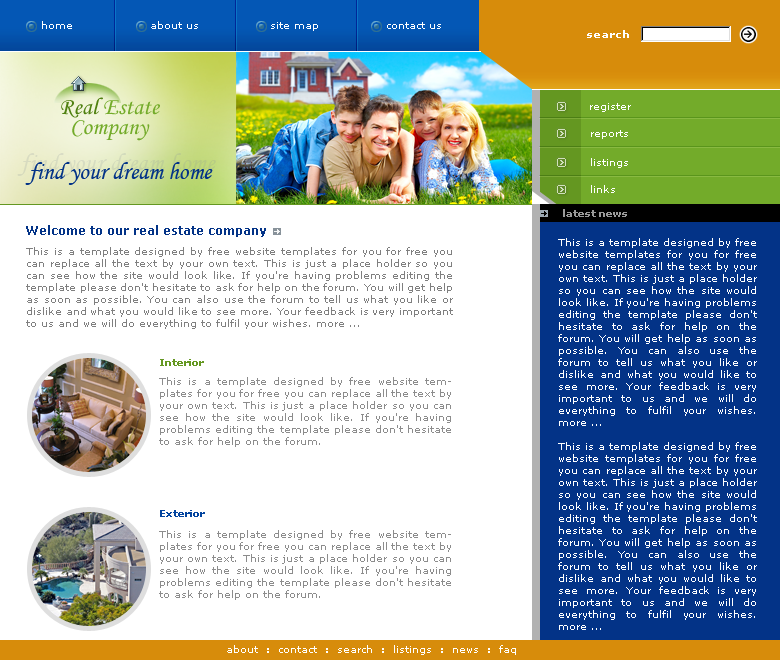
<style>
.page{position:relative;width:780px;height:660px;background:#ffffff}
.page>*{position:absolute;margin:0}
.t1{font:10px "Verdana";color:#ffffff}
.t2{font:10px "Verdana-Bold";letter-spacing:0.1em;color:#ffffff}
.t3{font:24px/20px "MonotypeCorsiva";color:#73ab2a}
.t4{font:24px/20px "MonotypeCorsiva";color:#508111}
.t5{font:10px "Verdana";letter-spacing:0.001em;color:#ffffff}
.t6{font:24px "MonotypeCorsiva";color:#033387}
.t7{font:10px "Verdana-Bold";letter-spacing:0.001em;color:#9a9a9a}
.t8{font:12px "Verdana-Bold";color:#033387}
.t9{font:10px/12px "Verdana";color:#ffffff}
.t10{font:10px/12px "Verdana";color:#7f7f7f}
.t11{font:10px "Verdana-Bold";color:#649721}
.t12{font:10px/12px "Verdana";color:#8c8c8c}
.t13{font:10px "Verdana-Bold";color:#03449f}
.t14{font:10px "Verdana-Bold";color:#ffffff}
</style>
<div class="page">
<p class="t1" style="left:42px;top:21px;width:30px;height:8px">home</p>
<p class="t1" style="left:151px;top:21px;width:47px;height:8px">about us</p>
<p class="t1" style="left:271px;top:22px;width:47px;height:9px">site map</p>
<p class="t1" style="left:387px;top:22px;width:54px;height:7px">contact us</p>
<p class="t2" style="left:587px;top:30px;width:42px;height:8px">search</p>
<p class="t3" style="left:61px;top:97px;width:99px;height:44px;text-align:center"><span class="t4">Real</span> Estate<br>Company</p>
<p class="t1" style="left:590px;top:103px;width:41px;height:9px">register</p>
<p class="t5" style="left:591px;top:130px;width:37px;height:9px">reports</p>
<p class="t5" style="left:591px;top:158px;width:37px;height:10px">listings</p>
<p class="t6" style="left:25px;top:162px;width:188px;height:23px">find your dream home</p>
<p class="t5" style="left:591px;top:185px;width:24px;height:8px">links</p>
<p class="t7" style="left:563px;top:209px;width:64px;height:8px">latest news</p>
<p class="t8" style="left:26px;top:225px;width:240px;height:12px">Welcome to our real estate company</p>
<p class="t9" style="left:558px;top:238px;width:199px;height:392px;text-align:justify">This is a template designed by free website templates for you for free you can replace all the text by your own text. This is just a place holder so you can see how the site would look like. If you're having problems editing the template please don't hesitate to ask for help on the forum. You will get help as soon as possible. You can also use the forum to tell us what you like or dislike and what you would like to see more. Your feedback is very important to us and we will do everything to fulfil your wishes. more ... <br><br>This is a template designed by free website templates for you for free you can replace all the text by your own text. This is just a place holder so you can see how the site would look like. If you're having problems editing the template please don't hesitate to ask for help on the forum. You will get help as soon as possible. You can also use the forum to tell us what you like or dislike and what you would like to see more. Your feedback is very important to us and we will do everything to fulfil your wishes. more ...</p>
<p class="t10" style="left:26px;top:247px;width:427px;height:82px;text-align:justify">This is a template designed by free website templates for you for free you can replace all the text by your own text. This is just a place holder so you can see how the site would look like. If you're having problems editing the template please don't hesitate to ask for help on the forum. You will get help as soon as possible. You can also use the forum to tell us what you like or dislike and what you would like to see more. Your feedback is very important to us and we will do everything to fulfil your wishes. more ...</p>
<p class="t11" style="left:160px;top:359px;width:44px;height:7px">Interior</p>
<p class="t12" style="left:159px;top:377px;width:292px;height:70px;text-align:justify">This is a template designed by free website templates for you for free you can replace all the text by your own text. This is just a place holder so you can see how the site would look like. If you're having problems editing the template please don't hesitate to ask for help on the forum.</p>
<p class="t13" style="left:160px;top:510px;width:45px;height:7px">Exterior</p>
<p class="t12" style="left:159px;top:530px;width:292px;height:70px;text-align:justify">This is a template designed by free website templates for you for free you can replace all the text by your own text. This is just a place holder so you can see how the site would look like. If you're having problems editing the template please don't hesitate to ask for help on the forum.</p>
<p class="t1" style="left:227px;top:645px;width:289px;height:10px">about  <span class="t14">:</span>  contact  <span class="t14">:</span>  search  <span class="t14">:</span>  listings  <span class="t14">:</span>  news  <span class="t14">:</span>  faq</p>
</div>
